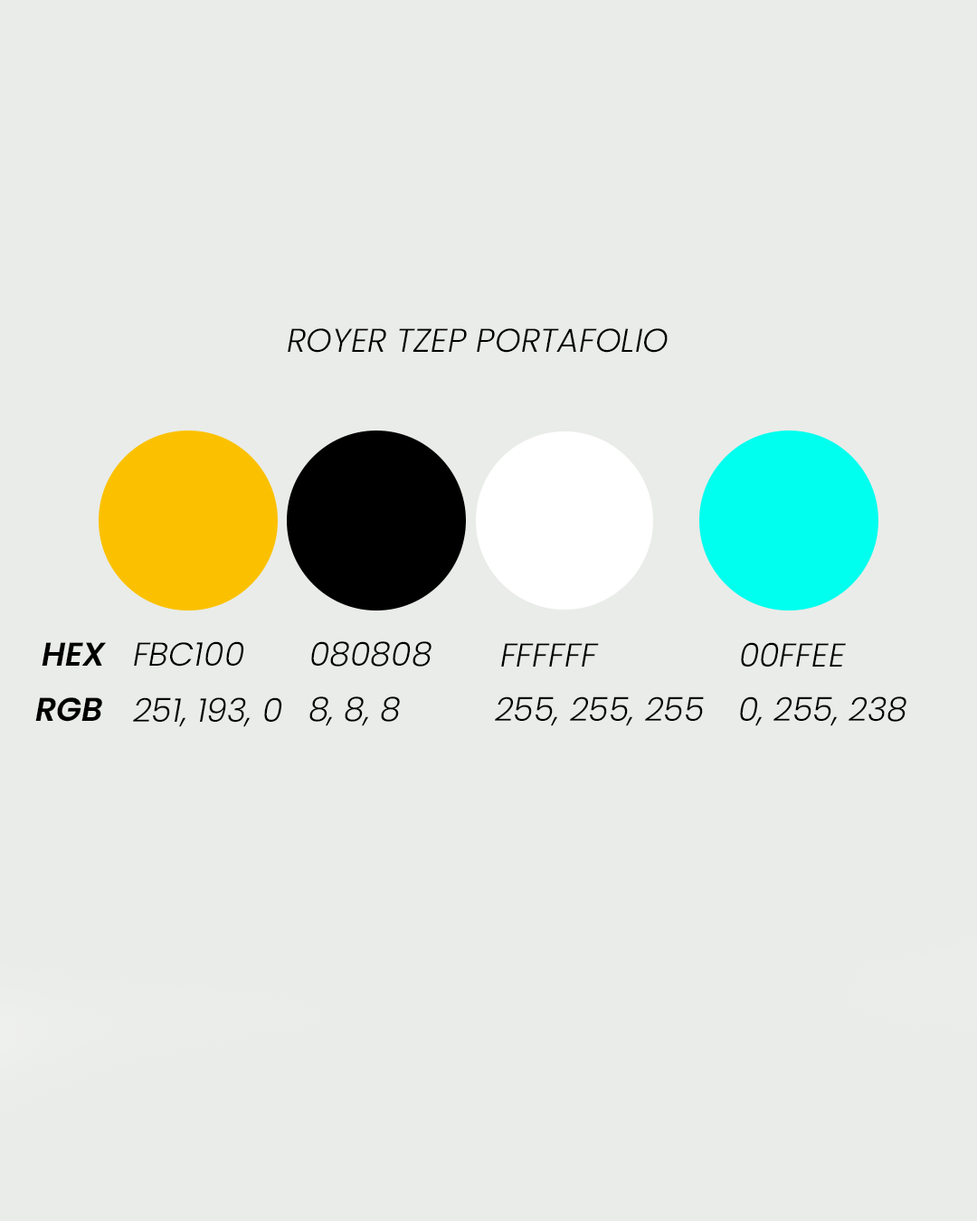
<style>
.page{position:relative;width:977px;height:1221px;background:#eaece9}
.page>*{position:absolute;margin:0}
.t1{font:33px "Poppins-LightItalic";color:#000000}
.t2{font:33px "Poppins-SemiBoldItalic";color:#000000}
</style>
<div class="page">
<p class="t1" style="left:288px;top:328px;width:379px;height:25px">ROYER TZEP PORTAFOLIO</p>
<p class="t1" style="left:134px;top:641px;width:110px;height:26px">FBC100</p>
<p class="t1" style="left:311px;top:641px;width:120px;height:26px">080808</p>
<p class="t2" style="left:42px;top:642px;width:65px;height:24px">HEX</p>
<p class="t1" style="left:501px;top:643px;width:98px;height:24px">FFFFFF</p>
<p class="t1" style="left:741px;top:642px;width:105px;height:25px">00FFEE</p>
<p class="t2" style="left:35px;top:697px;width:67px;height:25px">RGB</p>
<p class="t1" style="left:133px;top:697px;width:149px;height:30px">251, 193, 0</p>
<p class="t1" style="left:309px;top:696px;width:91px;height:30px">8, 8, 8</p>
<p class="t1" style="left:495px;top:696px;width:209px;height:30px">255, 255, 255</p>
<p class="t1" style="left:740px;top:696px;width:166px;height:30px">0, 255, 238</p>
</div>
